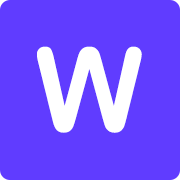
<style>
.page{position:relative;width:180px;height:180px;background:#603cff}
.page>*{position:absolute;margin:0}
.t1{font:115.8px "ArialRoundedMTBold";color:#ffffff}
</style>
<div class="page">
<p class="t1" style="left:37px;top:46px;width:105px;height:87px">W</p>
</div>
